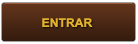
<style>
.page{position:relative;width:138px;height:44px}
.page>*{position:absolute;margin:0}
.t1{font:11.8px "Arial-BoldMT";color:#e3b32d}
</style>
<div class="page">
<p class="t1" style="left:42px;top:18px;width:51px;height:9px">ENTRAR</p>
</div>
